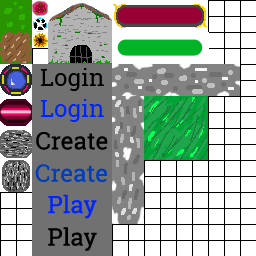
<style>
.page{position:relative;width:256px;height:256px;background:#ffffff}
.page>*{position:absolute;margin:0}
.t1{font:24px "RobotoSlab-Regular";color:#000000}
.t2{font:24px "RobotoSlab-Regular";color:#0024fe}
.t3{font:24px "RobotoSlab-Regular";color:#013ebb}
</style>
<div class="page">
<p class="t1" style="left:40px;top:68px;width:64px;height:23px">Login</p>
<p class="t2" style="left:40px;top:99px;width:64px;height:23px">Login</p>
<p class="t1" style="left:36px;top:132px;width:72px;height:18px">Create</p>
<p class="t3" style="left:35px;top:164px;width:72px;height:18px">Create</p>
<p class="t2" style="left:48px;top:194px;width:49px;height:25px">Play</p>
<p class="t1" style="left:48px;top:227px;width:49px;height:24px">Play</p>
</div>
